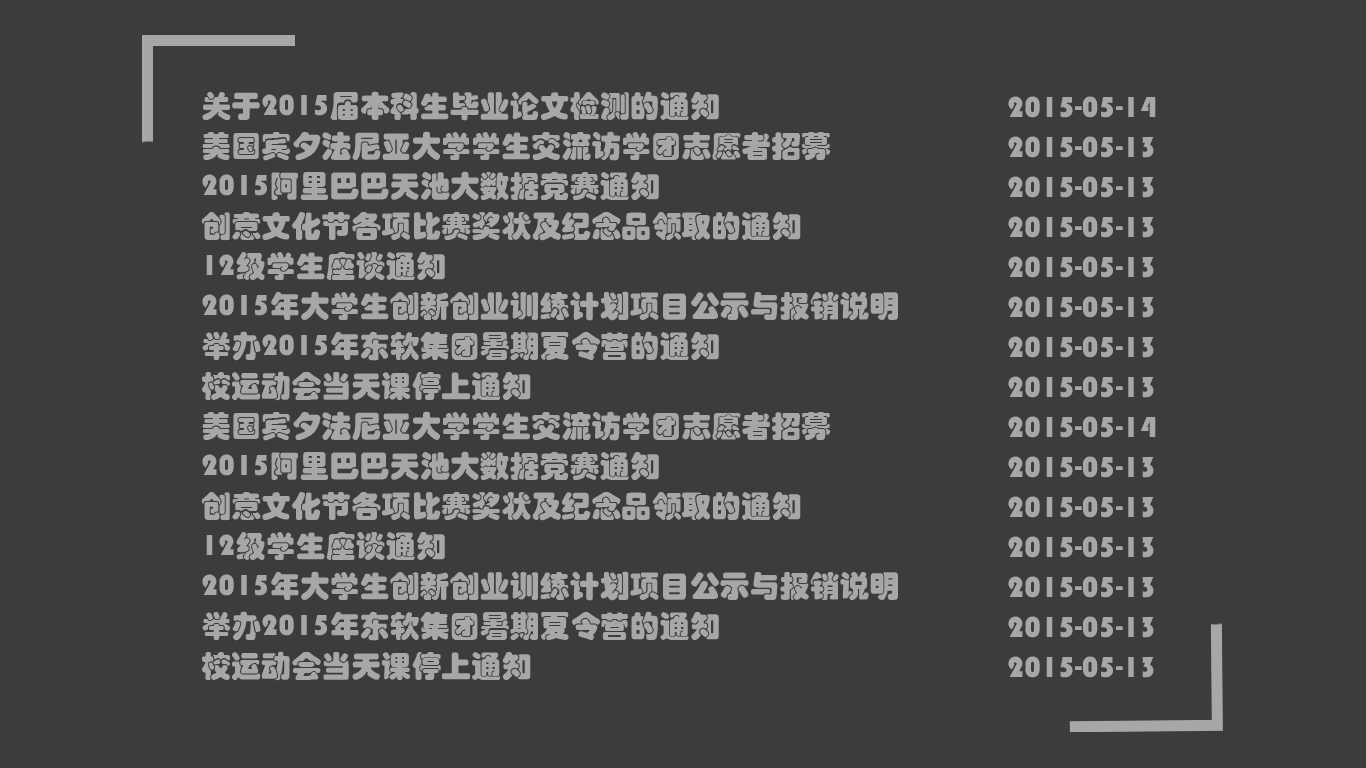
<style>
.page{position:relative;width:1366px;height:768px;background:#3d3c3c}
.page>*{position:absolute;margin:0}
.t1{font:30px/40px "STHupo";color:#a9a6a6}
</style>
<div class="page">
<p class="t1" style="left:201px;top:91px;width:697px;height:590px">关于2015届本科生毕业论文检测的通知                                    <br>美国宾夕法尼亚大学学生交流访学团志愿者招募                    <br>2015阿里巴巴天池大数据竞赛通知                                        <br>创意文化节各项比赛奖状及纪念品领取的通知                        <br>12级学生座谈通知                                                                        <br>2015年大学生创新创业训练计划项目公示与报销说明           <br>举办2015年东软集团暑期夏令营的通知                                    <br>校运动会当天课停上通知<br>美国宾夕法尼亚大学学生交流访学团志愿者招募                    <br>2015阿里巴巴天池大数据竞赛通知                                        <br>创意文化节各项比赛奖状及纪念品领取的通知                        <br>12级学生座谈通知                                                                        <br>2015年大学生创新创业训练计划项目公示与报销说明           <br>举办2015年东软集团暑期夏令营的通知                                    <br>校运动会当天课停上通知</p>
<p class="t1" style="left:1008px;top:96px;width:148px;height:582px">2015-05-14<br>2015-05-13<br>2015-05-13<br>2015-05-13<br>2015-05-13<br>2015-05-13<br>2015-05-13<br>2015-05-13<br>2015-05-14<br>2015-05-13<br>2015-05-13<br>2015-05-13<br>2015-05-13<br>2015-05-13<br>2015-05-13<br>2015-05-13</p>
</div>
